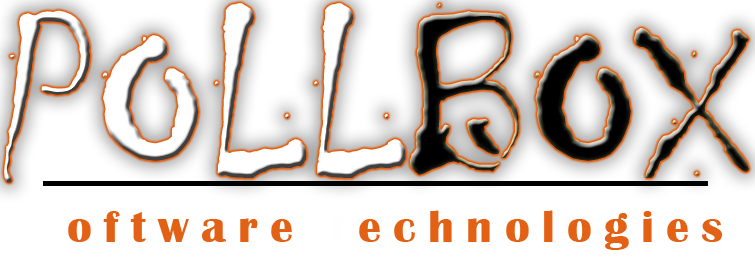
<style>
.page{position:relative;width:755px;height:266px;background:#ffffff}
.page>*{position:absolute;margin:0}
.t1{font:241.7px "Chiller-Regular";color:#ffffff}
.t2{font:241.7px "Chiller-Regular";color:#000000}
.t3{font:45.8px "BritannicBold";letter-spacing:0.27em;color:#e36114}
.t4{font:45.8px "BritannicBold";letter-spacing:0.27em;color:#ffffff}
.t5{font:45.8px "BritannicBold";letter-spacing:0.27em;color:#fefefe}
</style>
<div class="page">
<p class="t1" style="left:4px;top:3px;width:745px;height:180px">POLL<span class="t2">BOX</span></p>
<p class="t3" style="left:34px;top:210px;width:688px;height:40px"><span class="t4">s</span>oftware <span class="t5">t</span>echnologies</p>
</div>
